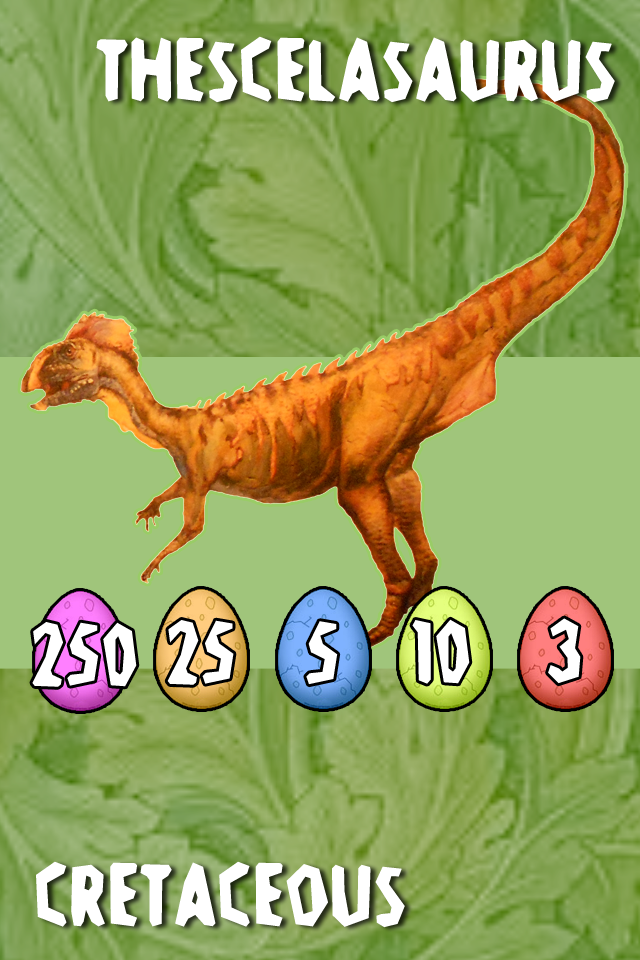
<style>
.page{position:relative;width:640px;height:960px}
.page>*{position:absolute;margin:0}
.t1{font:96px "Stone-Age";color:#ffffff}
</style>
<div class="page">
<p class="t1" style="left:96px;top:36px;width:519px;height:67px">Thescelasaurus</p>
<p class="t1" style="left:32px;top:622px;width:105px;height:65px">250</p>
<p class="t1" style="left:167px;top:620px;width:67px;height:65px">25</p>
<p class="t1" style="left:306px;top:621px;width:32px;height:64px">5</p>
<p class="t1" style="left:412px;top:619px;width:58px;height:65px">10</p>
<p class="t1" style="left:548px;top:618px;width:33px;height:66px">3</p>
<p class="t1" style="left:36px;top:861px;width:369px;height:67px">Cretaceous</p>
</div>
